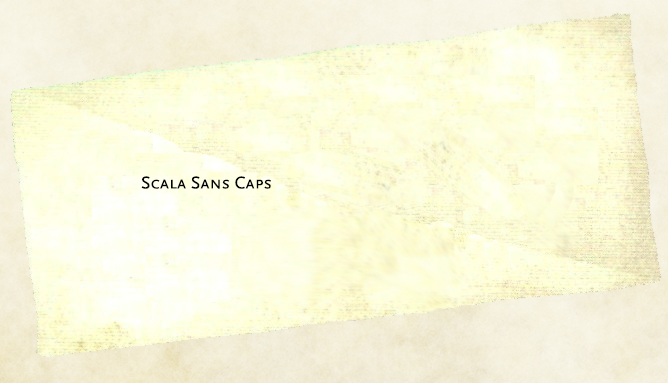
<style>
.page{position:relative;width:668px;height:383px}
.page>*{position:absolute;margin:0}
.t1{font:18px "ScalaSansCaps";color:#000000}
</style>
<div class="page">
<p class="t1" style="left:141px;top:176px;width:130px;height:13px">Scala Sans Caps</p>
</div>
